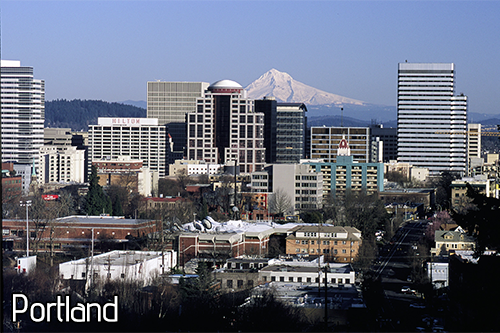
<style>
.page{position:relative;width:500px;height:333px}
.page>*{position:absolute;margin:0}
.t1{font:36px "advent-ExtraBold";color:#ffffff}
</style>
<div class="page">
<p class="t1" style="left:13px;top:294px;width:105px;height:28px">Portland</p>
</div>
